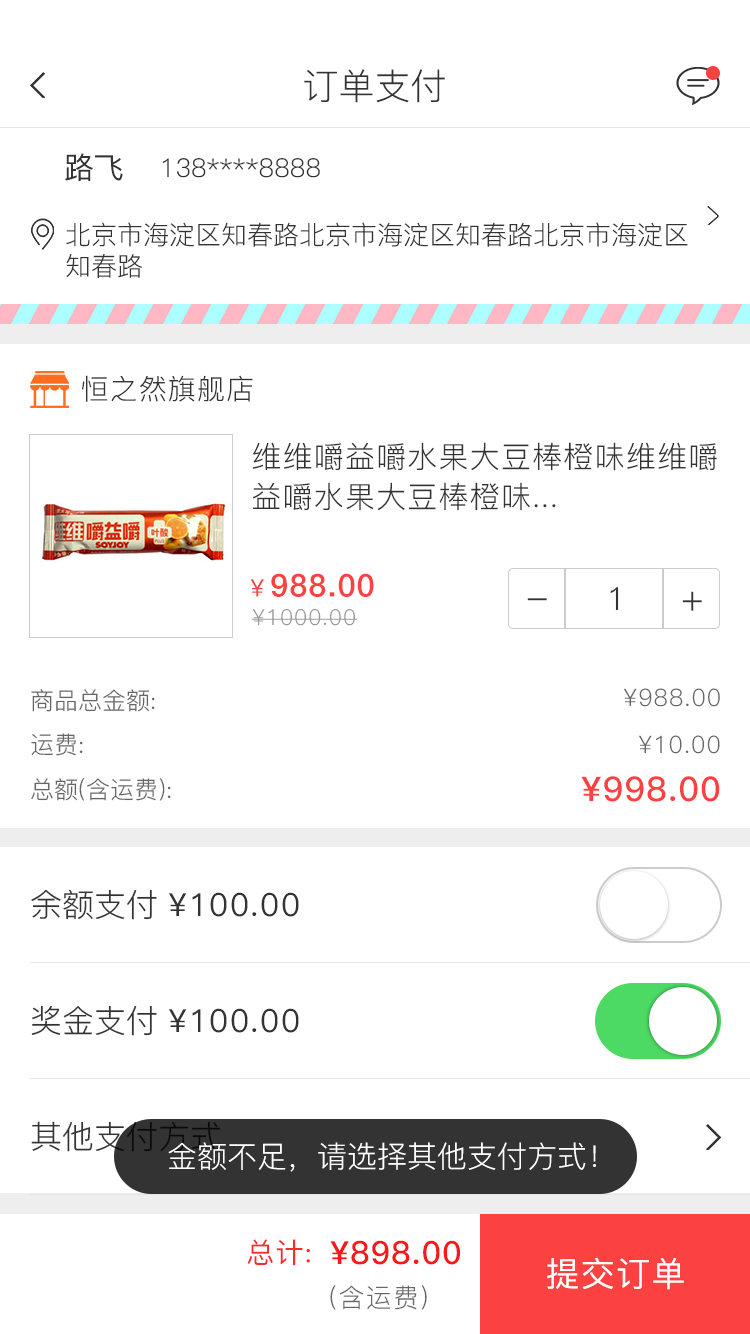
<style>
.page{position:relative;width:750px;height:1334px;background:#ffffff}
.page>*{position:absolute;margin:0}
.t1{font:36px "PingFang-SC-Regular";color:#333333}
.t2{font:30px "PingFang-SC-Medium";color:#333333}
.t3{font:26px "PingFang-SC-Regular";color:#333333}
.t4{font:28px "PingFang-SC-Regular";letter-spacing:0.04em;color:#333333}
.t5{font:30px/40px "PingFang-SC-Regular";letter-spacing:0.04em;color:#333333}
.t6{font:32px "HelveticaNeueLTPro-Md";letter-spacing:0.04em;color:#fc4141}
.t7{font:24px "PingFang-SC-Medium";letter-spacing:0.04em;color:#fc4141}
.t8{font:32px "PingFang-SC-Regular";color:#333333}
.t9{font:37.8px "PingFang-SC-Regular";color:#333333}
.t10{font:38px "PingFang-SC-Regular";color:#333333}
.t11{font:22px "PingFang-SC-Regular";letter-spacing:0.04em;color:#999999}
.t12{font:24px "PingFang-SC-Regular";color:#666666}
.t13{font:24px "PingFang-SC-Regular";letter-spacing:0.04em;color:#666666}
.t14{font:34px "PingFang-SC-Bold";letter-spacing:0.04em;color:#fc4141}
.t15{font:32px "PingFang-SC-Medium";letter-spacing:0.04em;color:#333333}
.t16{font:32px "PingFang-SC-Regular"}
.t17{font:30px "PingFang-SC-Regular";color:#ffffff}
.t18{font:28px "PingFang-SC-Medium";letter-spacing:0.04em;color:#f72c2c}
.t19{font:32px "PingFang-SC-Bold";letter-spacing:0.04em;color:#f71919}
.t20{font:34px "PingFang-SC-Medium";letter-spacing:0.04em;color:#ffffff}
.t21{font:26px "PingFang-SC-Regular";letter-spacing:0.04em;color:#666666}
</style>
<div class="page">
<p class="t1" style="left:304px;top:69px;width:141px;height:34px">订单支付</p>
<p class="t2" style="left:65px;top:153px;width:58px;height:28px">路飞</p>
<p class="t3" style="left:162px;top:158px;width:158px;height:20px">138****8888</p>
<p class="t3" style="left:66px;top:222px;width:622px;height:56px">北京市海淀区知春路北京市海淀区知春路北京市海淀区<br>知春路</p>
<p class="t4" style="left:81px;top:375px;width:172px;height:27px">恒之然旗舰店</p>
<p class="t5" style="left:252px;top:442px;width:465px;height:69px">维维嚼益嚼水果大豆棒橙味维维嚼<br>益嚼水果大豆棒橙味...</p>
<p class="t6" style="left:250px;top:573px;width:124px;height:24px"><span class="t7">￥</span>988.00</p>
<p class="t8" style="left:610px;top:587px;width:9px;height:24px">1</p>
<p class="t9" style="left:682px;top:591px;width:20px;height:20px">+</p>
<p class="t10" style="left:527px;top:598px;width:20px;height:3px">-</p>
<p class="t11" style="left:251px;top:609px;width:106px;height:17px">¥1000.00</p>
<p class="t12" style="left:31px;top:689px;width:124px;height:23px">商品总金额:</p>
<p class="t13" style="left:623px;top:688px;width:97px;height:19px">¥988.00</p>
<p class="t12" style="left:31px;top:733px;width:52px;height:23px">运费:</p>
<p class="t13" style="left:638px;top:735px;width:82px;height:19px">¥10.00</p>
<p class="t12" style="left:31px;top:778px;width:140px;height:23px">总额(含运费):</p>
<p class="t14" style="left:581px;top:776px;width:139px;height:26px">¥998.00</p>
<p class="t15" style="left:31px;top:889px;width:268px;height:31px"><span class="t8">余额支付 </span>¥100.00</p>
<p class="t15" style="left:31px;top:1005px;width:268px;height:31px"><span class="t8">奖金支付 </span>¥100.00</p>
<p class="t16" style="left:31px;top:1121px;width:190px;height:31px">其他支付方式</p>
<p class="t17" style="left:168px;top:1142px;width:428px;height:30px">金额不足，请选择其他支付方式！</p>
<p class="t18" style="left:247px;top:1239px;width:63px;height:27px">总计:</p>
<p class="t19" style="left:330px;top:1240px;width:130px;height:25px">¥898.00</p>
<p class="t20" style="left:547px;top:1257px;width:137px;height:33px">提交订单</p>
<p class="t21" style="left:330px;top:1285px;width:97px;height:25px">(含运费)</p>
</div>
